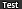
<style>
.page{position:relative;width:22px;height:9px;background:#333333}
.page>*{position:absolute;margin:0}
.t1{font:8px "KohinoorBangla-Regular";color:#ffffff}
</style>
<div class="page">
<p class="t1" style="left:2px;top:1px;width:17px;height:7px">Test</p>
</div>
